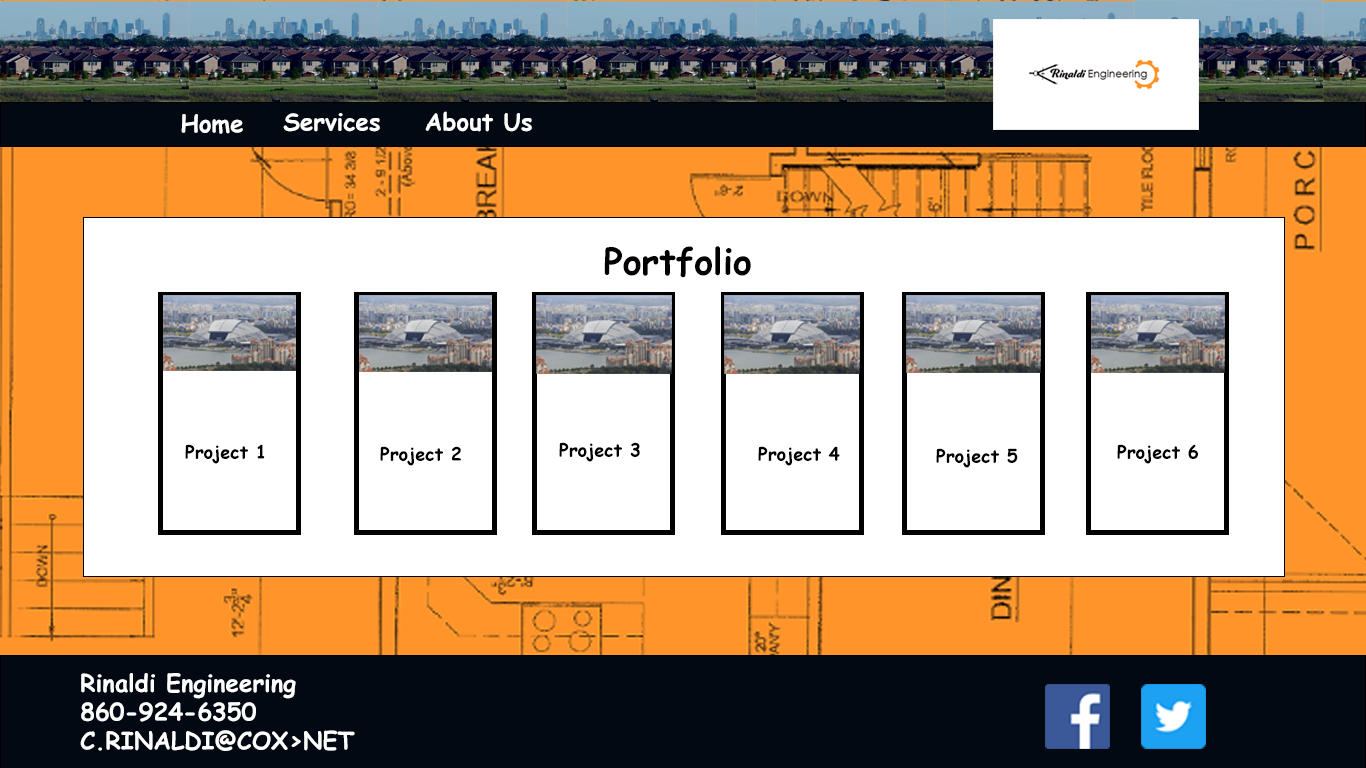
<style>
.page{position:relative;width:1366px;height:768px;background:#ffffff}
.page>*{position:absolute;margin:0}
.t1{font:24px "ComicSansMS-Bold";color:#ffffff}
.t2{font:36px "ComicSansMS-Bold";color:#030000}
.t3{font:18px "ComicSansMS-Bold";color:#030000}
</style>
<div class="page">
<p class="t1" style="left:283px;top:113px;width:97px;height:19px">Services</p>
<p class="t1" style="left:425px;top:111px;width:107px;height:21px">About Us</p>
<p class="t1" style="left:181px;top:114px;width:62px;height:20px">Home</p>
<p class="t2" style="left:604px;top:246px;width:147px;height:32px">Portfolio</p>
<p class="t3" style="left:185px;top:444px;width:80px;height:20px">Project 1</p>
<p class="t3" style="left:380px;top:446px;width:81px;height:20px">Project 2</p>
<p class="t3" style="left:559px;top:442px;width:81px;height:20px">Project 3</p>
<p class="t3" style="left:758px;top:446px;width:82px;height:20px">Project 4</p>
<p class="t3" style="left:936px;top:448px;width:82px;height:20px">Project 5</p>
<p class="t3" style="left:1117px;top:444px;width:81px;height:20px">Project 6</p>
<p class="t1" style="left:80px;top:673px;width:275px;height:78px">Rinaldi Engineering<br>860-924-6350<br>C.RINALDI@COX&gt;NET</p>
</div>
